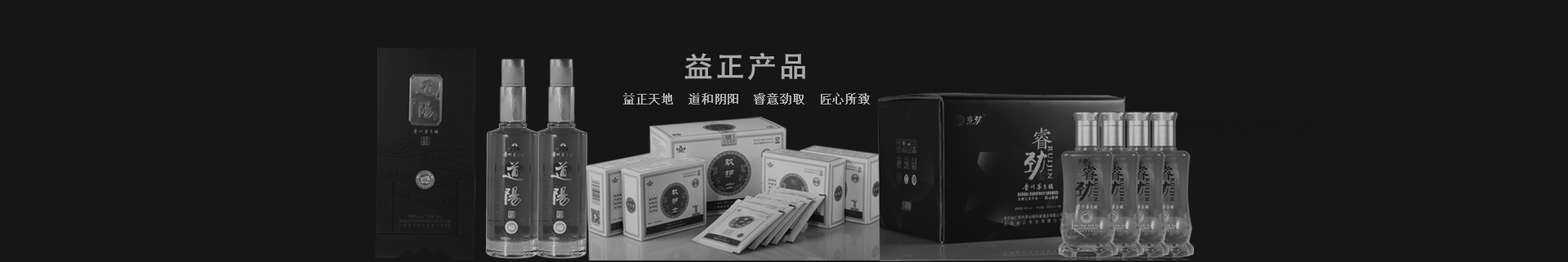
<style>
.page{position:relative;width:1568px;height:262px;background:#161616}
.page>*{position:absolute;margin:0}
.t1{font:29.4px "AdobeHeitiStd-Regular";letter-spacing:0.05em;color:#a9a9a9;font-weight:bold}
.t2{font:11.4px "SimSun";letter-spacing:0.05em;color:#ababab;font-weight:bold}
</style>
<div class="page">
<p class="t1" style="left:684px;top:52px;width:121px;height:29px">益正产品</p>
<p class="t2" style="left:623px;top:93px;width:247px;height:12px">益正天地  道和阴阳  睿意劲取  匠心所致</p>
</div>
